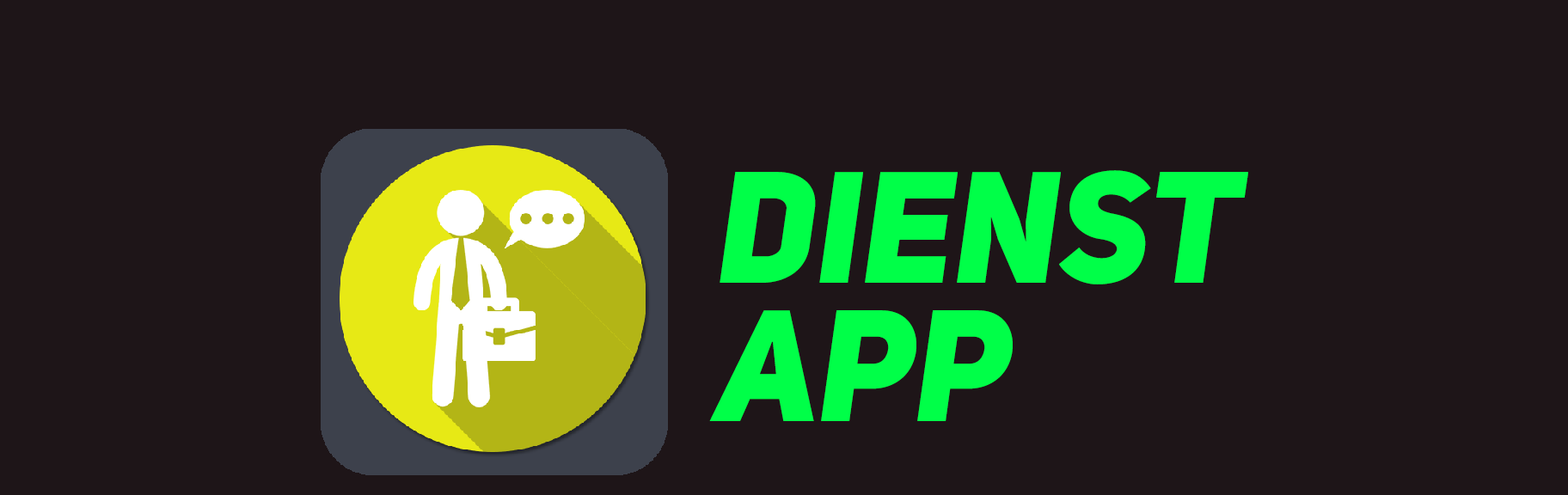
<style>
.page{position:relative;width:1568px;height:495px;background:#1e1518}
.page>*{position:absolute;margin:0}
.t1{font:156.4px/138.4px "UniSansHeavyItalicCAPS";color:#00ff48}
</style>
<div class="page">
<p class="t1" style="left:709px;top:170px;width:539px;height:251px">DIENST <br>APP</p>
</div>
